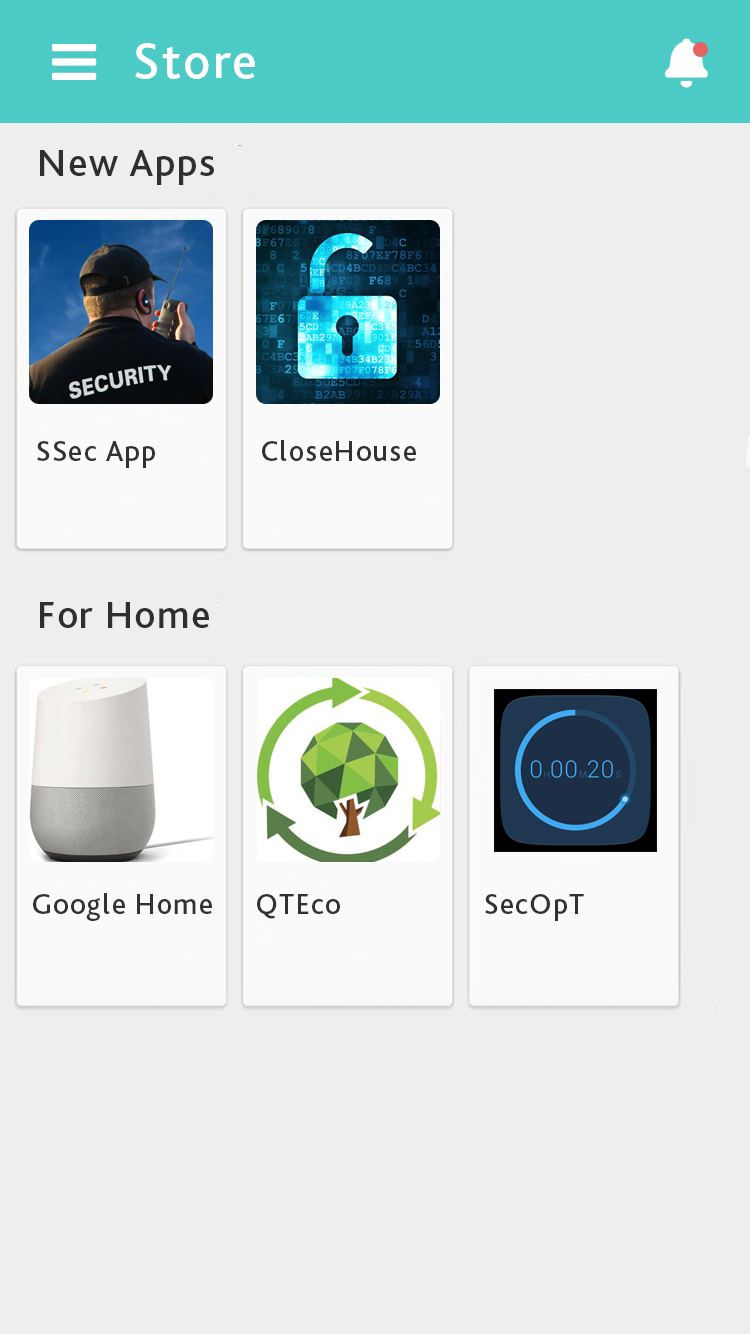
<style>
.page{position:relative;width:750px;height:1334px;background:#eeeeee}
.page>*{position:absolute;margin:0}
.t1{font:51.7px "BlissPro-Medium";letter-spacing:0.04em;color:#ffffff}
.t2{font:39.5px "BlissPro-Medium";letter-spacing:0.04em;color:#2f2f2f}
.t3{font:29.4px "BlissPro-Medium";letter-spacing:0.04em;color:#323232}
</style>
<div class="page">
<p class="t1" style="left:135px;top:43px;width:120px;height:36px">Store</p>
<p class="t2" style="left:40px;top:150px;width:174px;height:35px">New Apps</p>
<p class="t3" style="left:37px;top:441px;width:118px;height:27px">SSec App</p>
<p class="t3" style="left:262px;top:440px;width:154px;height:22px">CloseHouse</p>
<p class="t2" style="left:40px;top:602px;width:169px;height:26px">For Home</p>
<p class="t3" style="left:33px;top:893px;width:179px;height:28px">Google Home</p>
<p class="t3" style="left:257px;top:894px;width:83px;height:25px">QTEco</p>
<p class="t3" style="left:485px;top:894px;width:100px;height:27px">SecOpT</p>
</div>
